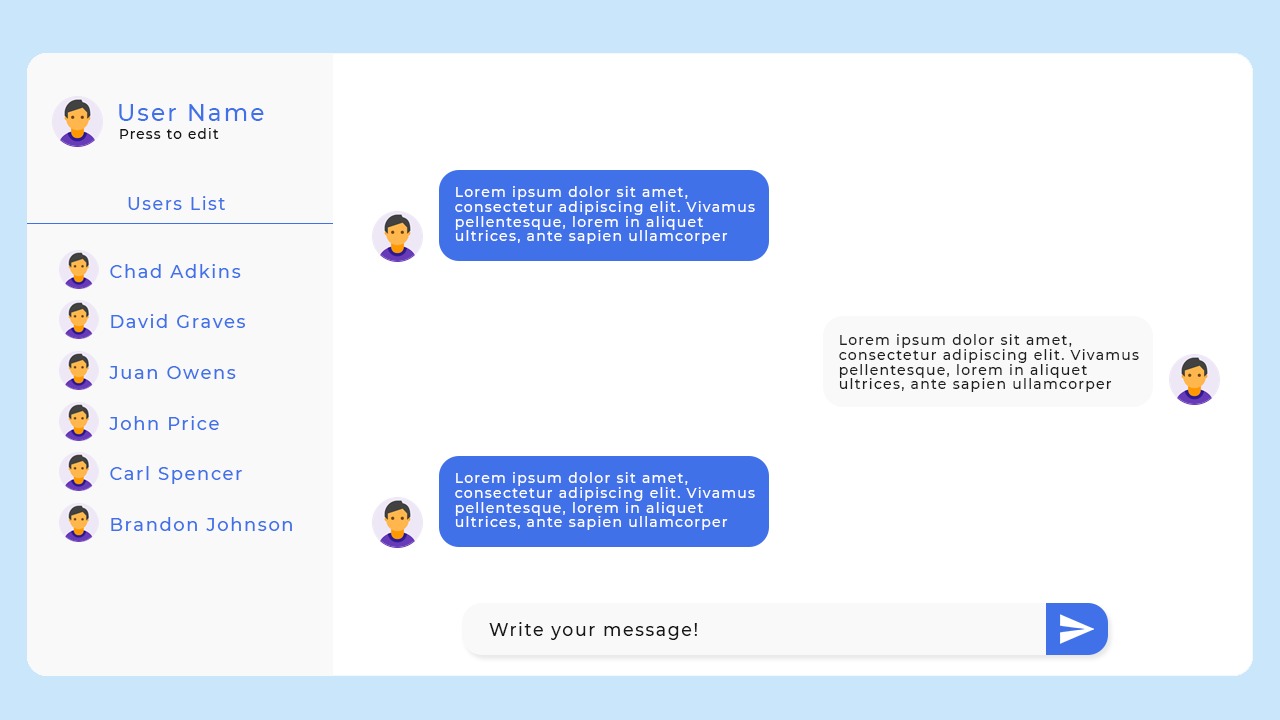
<style>
.page{position:relative;width:1280px;height:720px;background:#ffffff}
.page>*{position:absolute;margin:0}
.t1{font:24.2px "Montserrat-Medium";letter-spacing:0.09em;color:#4071e8;scale:0.95 1}
.t2{font:14.2px "Montserrat-Medium";letter-spacing:0.09em;color:#171717;scale:0.95 1}
.t3{font:18.2px "Montserrat-Medium";letter-spacing:0.09em;color:#4071e8;scale:0.95 1}
.t4{font:14px/14.8px "Montserrat-Medium";letter-spacing:0.09em;color:#ffffff}
.t5{font:18.5px "Montserrat-Medium";letter-spacing:0.09em;color:#4071e8;scale:0.97 1}
.t6{font:14px/14.8px "Montserrat-Medium";letter-spacing:0.09em;color:#1f1f1f}
.t7{font:18.2px "Montserrat-Medium";letter-spacing:0.09em;color:#171717;scale:0.95 1}
</style>
<div class="page">
<p class="t1" style="left:119px;top:104px;width:145px;height:17px">User Name</p>
<p class="t2" style="left:120px;top:128px;width:99px;height:11px">Press to edit</p>
<p class="t3" style="left:128px;top:196px;width:97px;height:14px">Users List</p>
<p class="t4" style="left:455px;top:186px;width:300px;height:58px">Lorem ipsum dolor sit amet, consectetur adipiscing elit. Vivamus pellentesque, lorem in aliquet ultrices, ante sapien ullamcorper tortor, eu sagittis magna tortor ut lacus. Nunc condimentum elit et massa condimentum ullamcorper.</p>
<p class="t5" style="left:110px;top:264px;width:131px;height:14px">Chad Adkins</p>
<p class="t5" style="left:111px;top:314px;width:134px;height:14px">David Graves</p>
<p class="t6" style="left:839px;top:334px;width:300px;height:58px">Lorem ipsum dolor sit amet, consectetur adipiscing elit. Vivamus pellentesque, lorem in aliquet ultrices, ante sapien ullamcorper tortor, eu sagittis magna tortor ut lacus. Nunc condimentum elit et massa condimentum ullamcorper.</p>
<p class="t5" style="left:109px;top:366px;width:127px;height:13px">Juan Owens</p>
<p class="t5" style="left:109px;top:416px;width:110px;height:14px">John Price</p>
<p class="t5" style="left:110px;top:466px;width:132px;height:18px">Carl Spencer</p>
<p class="t4" style="left:455px;top:472px;width:300px;height:58px">Lorem ipsum dolor sit amet, consectetur adipiscing elit. Vivamus pellentesque, lorem in aliquet ultrices, ante sapien ullamcorper tortor, eu sagittis magna tortor ut lacus. Nunc condimentum elit et massa condimentum ullamcorper.</p>
<p class="t5" style="left:111px;top:517px;width:181px;height:14px">Brandon Johnson</p>
<p class="t7" style="left:489px;top:622px;width:208px;height:18px">Write your message!</p>
</div>
